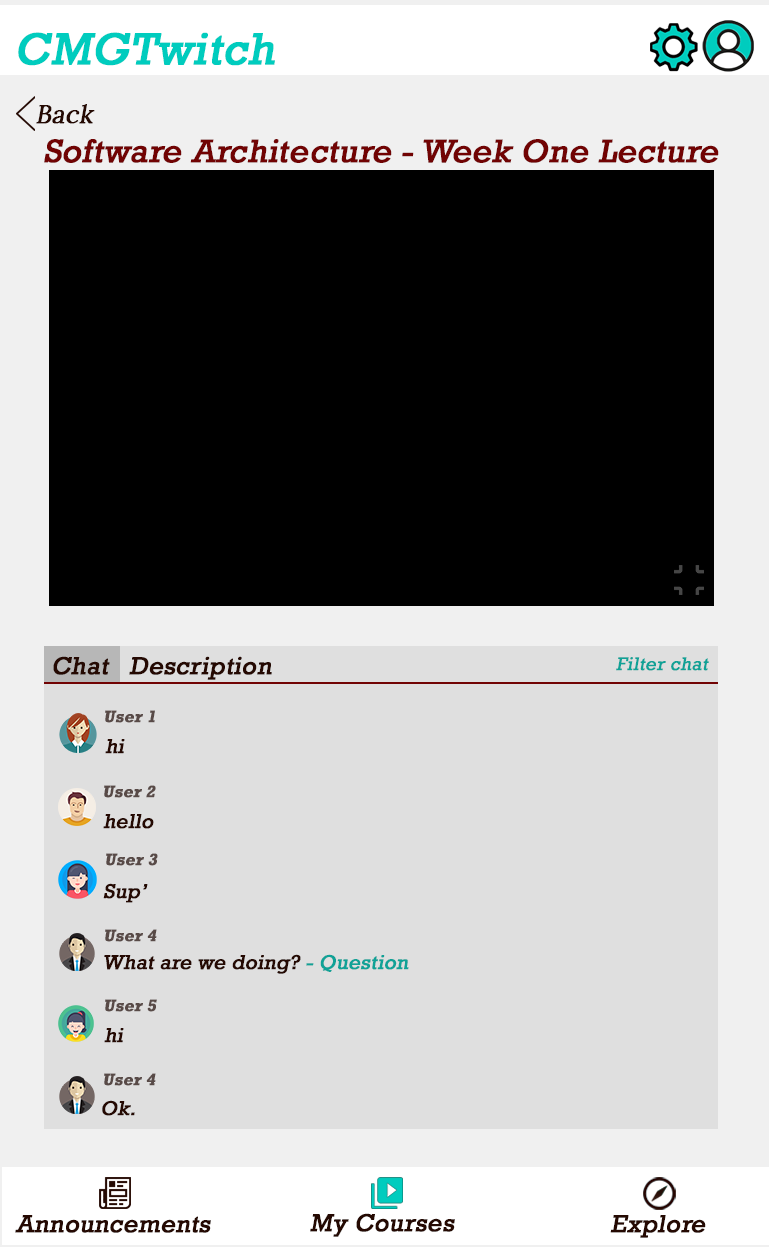
<style>
.page{position:relative;width:769px;height:1247px;background:#dfdfdf}
.page>*{position:absolute;margin:0}
.t1{font:45.4px "Rockwell";color:#00ccbe;font-weight:bold;font-style:italic}
.t2{font:25px "Lora-Regular";color:#250902;font-weight:bold;font-style:italic}
.t3{font:33.3px "Rockwell";color:#710303;font-weight:bold;font-style:italic}
.t4{font:25px "Rockwell";color:#250902;font-weight:bold;font-style:italic}
.t5{font:18.7px "Rockwell";color:#10a297;font-weight:bold;font-style:italic}
.t6{font:16.7px "Rockwell-Bold";color:#584a47;font-weight:bold;font-style:italic}
.t7{font:20.5px "Rockwell";color:#250902;font-weight:bold;font-style:italic}
.t8{font:20.5px "Rockwell";color:#10a297;font-weight:bold;font-style:italic}
</style>
<div class="page">
<p class="t1" style="left:18px;top:32px;width:257px;height:34px">CMGTwitch</p>
<p class="t2" style="left:36px;top:104px;width:59px;height:20px">Back</p>
<p class="t3" style="left:44px;top:139px;width:675px;height:24px">Software Architecture - Week One Lecture</p>
<p class="t4" style="left:53px;top:656px;width:219px;height:24px">Chat   Description</p>
<p class="t5" style="left:616px;top:657px;width:93px;height:14px">Filter chat</p>
<p class="t6" style="left:105px;top:710px;width:50px;height:13px">User 1</p>
<p class="t7" style="left:105px;top:739px;width:20px;height:15px">hi</p>
<p class="t6" style="left:104px;top:785px;width:52px;height:13px">User 2</p>
<p class="t7" style="left:103px;top:814px;width:51px;height:15px">hello</p>
<p class="t6" style="left:106px;top:853px;width:52px;height:13px">User 3</p>
<p class="t7" style="left:103px;top:883px;width:45px;height:20px">Sup’</p>
<p class="t6" style="left:105px;top:929px;width:52px;height:13px">User 4</p>
<p class="t7" style="left:104px;top:954px;width:305px;height:20px">What are we doing? <span class="t8">- Question</span></p>
<p class="t6" style="left:105px;top:999px;width:52px;height:13px">User 5</p>
<p class="t7" style="left:104px;top:1028px;width:20px;height:15px">hi</p>
<p class="t6" style="left:104px;top:1073px;width:52px;height:13px">User 4</p>
<p class="t7" style="left:102px;top:1100px;width:33px;height:16px">Ok.</p>
<p class="t4" style="left:15px;top:1215px;width:196px;height:18px">Announcements</p>
<p class="t4" style="left:310px;top:1213px;width:145px;height:24px">My Courses</p>
<p class="t4" style="left:610px;top:1215px;width:96px;height:23px">Explore</p>
</div>
